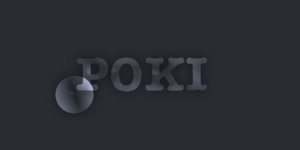
<style>
.page{position:relative;width:300px;height:150px;background:#2a2c32}
.page>*{position:absolute;margin:0}
.t1{font:50px "AmericanTypewriter-Bold";color:#3e404a}
</style>
<div class="page">
<p class="t1" style="left:75px;top:57px;width:133px;height:35px">POKI</p>
</div>
